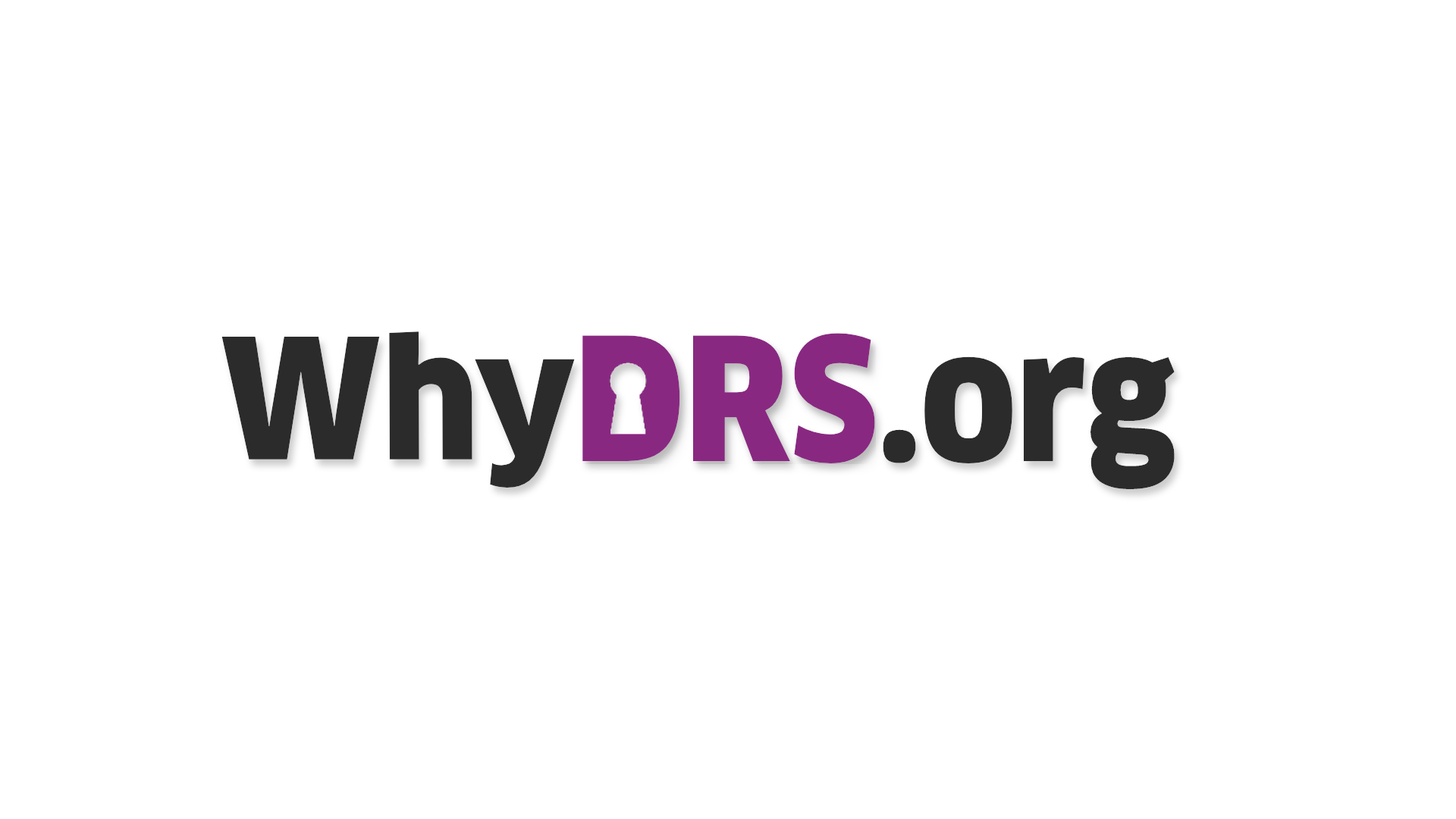
<style>
.page{position:relative;width:1456px;height:819px;background:#ffffff}
.page>*{position:absolute;margin:0}
.t1{font:163.6px "ClanPro-Black";color:#2b2b2b;scale:0.93 1}
.t2{font:167.1px "ClanPro-Black";color:#2b2b2b;scale:0.91 1}
</style>
<div class="page">
<p class="t1" style="left:221px;top:331px;width:354px;height:157px">Why</p>
<p class="t2" style="left:883px;top:356px;width:292px;height:134px">.org</p>
</div>
